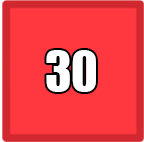
<style>
.page{position:relative;width:144px;height:142px;background:#ff3840}
.page>*{position:absolute;margin:0}
.t1{font:50px "Impact";color:#ffffff}
</style>
<div class="page">
<p class="t1" style="left:46px;top:50px;width:50px;height:42px">30</p>
</div>
